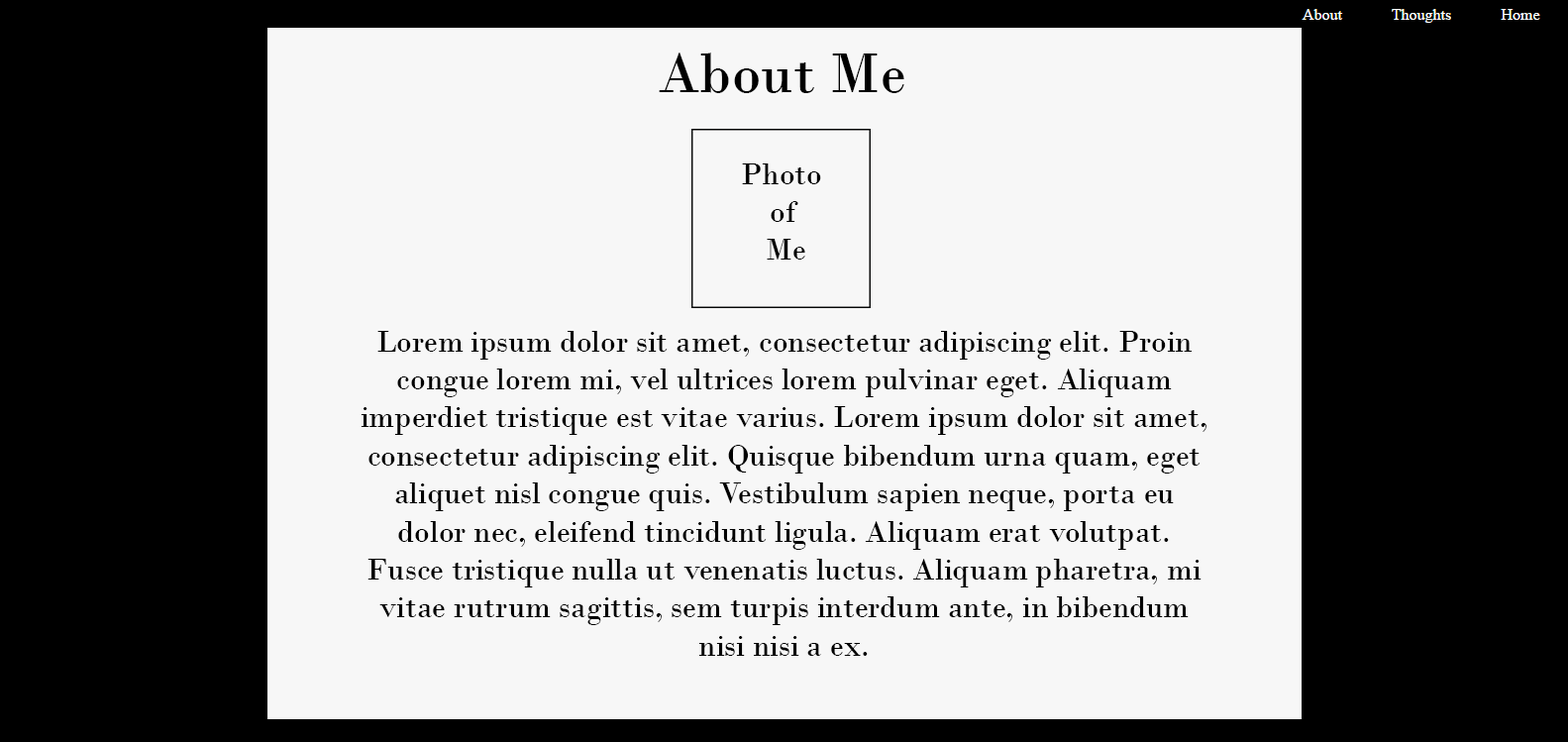
<style>
.page{position:relative;width:1568px;height:742px;background:#f7f7f7}
.page>*{position:absolute;margin:0}
.t1{font:59.4px "BodoniMT";color:#000000}
.t2{font:31.7px "BodoniMT";color:#000000}
</style>
<div class="page">
<p class="t1" style="left:659px;top:52px;width:245px;height:41px">About Me</p>
<p class="t2" style="left:742px;top:163px;width:79px;height:97px;text-align:center">Photo <br>of<br>Me</p>
<p class="t2" style="left:361px;top:331px;width:845px;height:325px;text-align:center">Lorem ipsum dolor sit amet, consectetur adipiscing elit. Proin congue lorem mi, vel ultrices lorem pulvinar eget. Aliquam imperdiet tristique est vitae varius. Lorem ipsum dolor sit amet, consectetur adipiscing elit. Quisque bibendum urna quam, eget aliquet nisl congue quis. Vestibulum sapien neque, porta eu dolor nec, eleifend tincidunt ligula. Aliquam erat volutpat. Fusce tristique nulla ut venenatis luctus. Aliquam pharetra, mi vitae rutrum sagittis, sem turpis interdum ante, in bibendum nisi nisi a ex.</p>
</div>
